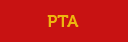
<style>
.page{position:relative;width:128px;height:42px;background:#c81212}
.page>*{position:absolute;margin:0}
.t1{font:17px "Museo-700";color:#edb60f}
</style>
<div class="page">
<p class="t1" style="left:47px;top:15px;width:32px;height:12px">PTA</p>
</div>
